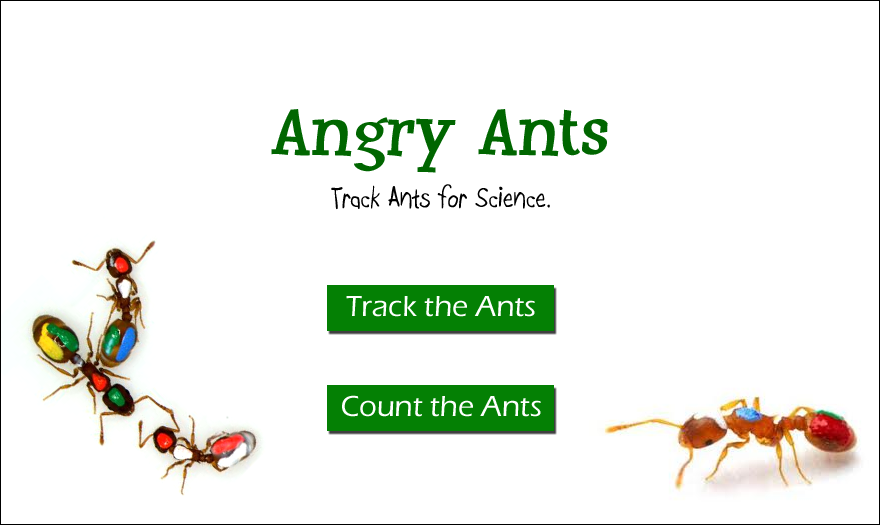
<style>
.page{position:relative;width:880px;height:525px;background:#ffffff}
.page>*{position:absolute;margin:0}
.t1{font:70px "Huxtable";color:#006600}
.t2{font:30px "Boopee";color:#000000}
.t3{font:30px "ErasITC-Medium";color:#ffffff}
</style>
<div class="page">
<p class="t1" style="left:271px;top:109px;width:337px;height:64px">Angry Ants</p>
<p class="t2" style="left:331px;top:184px;width:219px;height:26px">Track Ants for Science.</p>
<p class="t3" style="left:346px;top:296px;width:189px;height:21px">Track the Ants</p>
<p class="t3" style="left:342px;top:395px;width:199px;height:22px">Count the Ants</p>
</div>
